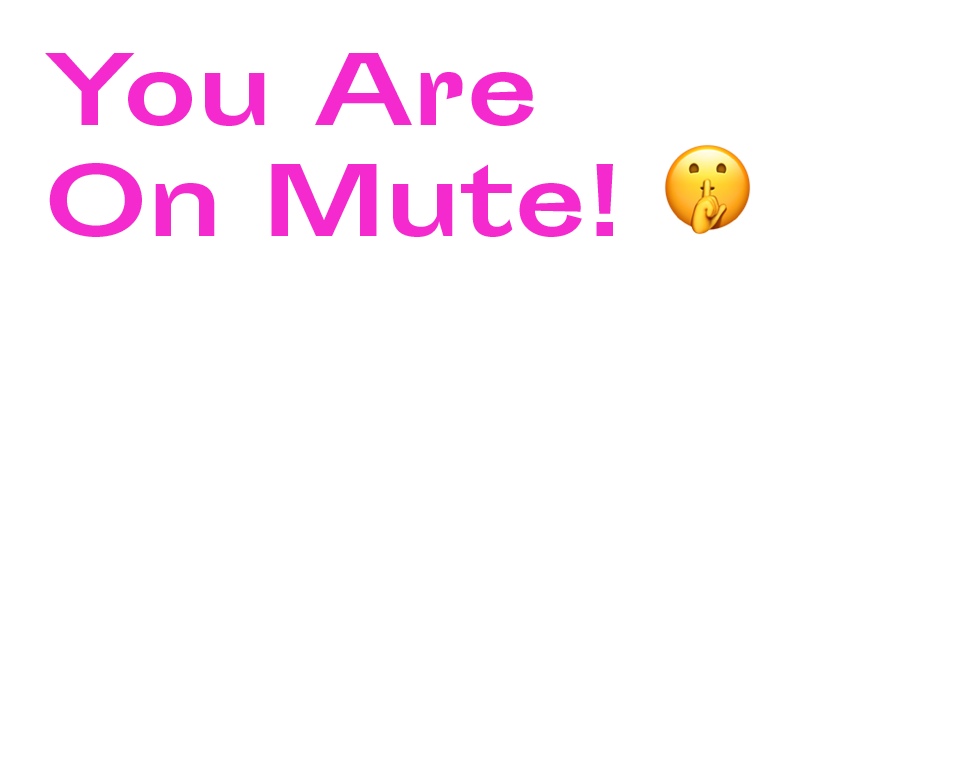
<style>
.page{position:relative;width:961px;height:781px;background:#ffffff}
.page>*{position:absolute;margin:0}
.t1{font:93px "SportingGrotesque-Bold";color:#f42ace}
.t2{font:93px "AppleColorEmoji";color:#000000}
</style>
<div class="page">
<p class="t1" style="left:45px;top:53px;width:706px;height:184px">You Are <br>On Mute! <span class="t2">🤫</span></p>
</div>
